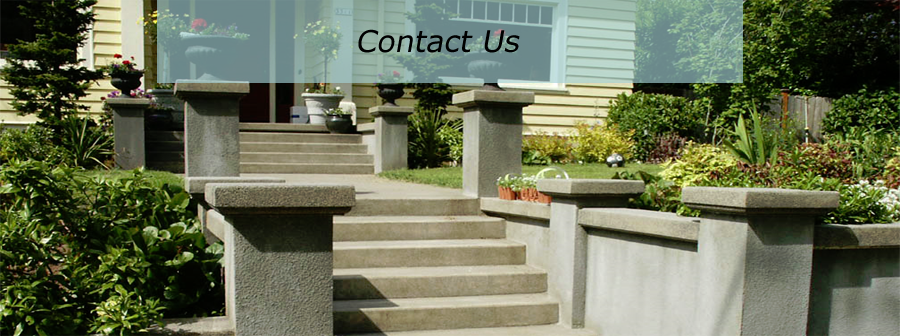
<style>
.page{position:relative;width:900px;height:336px}
.page>*{position:absolute;margin:0}
.t1{font:30px "Verdana";color:#000000;font-style:italic}
</style>
<div class="page">
<p class="t1" style="left:358px;top:29px;width:162px;height:24px">Contact Us</p>
</div>
